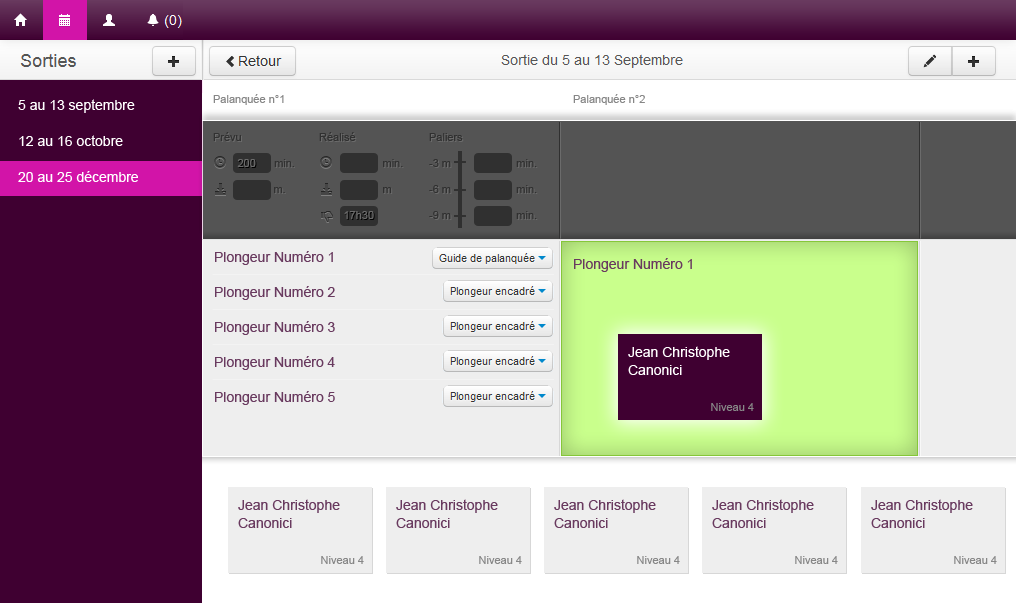
<style>
.page{position:relative;width:1016px;height:603px;background:#eeeeee}
.page>*{position:absolute;margin:0}
.t1{font:14px/36px "ArialMT";color:#ffffff}
.t2{font:11px "ArialMT";color:#878787}
.t3{font:14px/35px "ArialMT";color:#693a5f}
.t4{font:14px "ArialMT";color:#693a5f}
.t5{font:14px/18px "ArialMT";color:#ffffff}
.t6{font:14px/35px "ArialMT";color:#ffffff}
.t7{font:14px/18px "ArialMT";color:#693a5f}
</style>
<div class="page">
<p class="t1" style="left:18px;top:99px;width:120px;height:83px">5 au 13 septembre<br>12 au 16 octobre<br>20 au 25 décembre</p>
<p class="t2" style="left:213px;top:94px;width:432px;height:11px">Palanquée n°1        Palanquée n°2</p>
<p class="t3" style="left:215px;top:251px;width:120px;height:154px">Plongeur Numéro 1<br>Plongeur Numéro 2<br>Plongeur Numéro 3<br>Plongeur Numéro 4<br>Plongeur Numéro 5</p>
<p class="t4" style="left:574px;top:258px;width:118px;height:14px">Plongeur Numéro 1</p>
<p class="t5" style="left:628px;top:346px;width:102px;height:29px"><span class="t6">Jean C</span>hristophe<br>Canonici</p>
<p class="t2" style="left:711px;top:403px;width:43px;height:8px">Niveau 4</p>
<p class="t7" style="left:238px;top:499px;width:102px;height:29px"><span class="t3">Jean C</span>hristophe<br>Canonici</p>
<p class="t7" style="left:396px;top:499px;width:102px;height:29px"><span class="t3">Jean C</span>hristophe<br>Canonici</p>
<p class="t7" style="left:554px;top:499px;width:102px;height:29px"><span class="t3">Jean C</span>hristophe<br>Canonici</p>
<p class="t7" style="left:712px;top:499px;width:102px;height:29px"><span class="t3">Jean C</span>hristophe<br>Canonici</p>
<p class="t7" style="left:871px;top:499px;width:102px;height:29px"><span class="t3">Jean C</span>hristophe<br>Canonici</p>
<p class="t2" style="left:321px;top:556px;width:43px;height:8px">Niveau 4</p>
<p class="t2" style="left:479px;top:556px;width:43px;height:8px">Niveau 4</p>
<p class="t2" style="left:637px;top:556px;width:43px;height:8px">Niveau 4</p>
<p class="t2" style="left:795px;top:556px;width:43px;height:8px">Niveau 4</p>
<p class="t2" style="left:954px;top:556px;width:43px;height:8px">Niveau 4</p>
</div>
